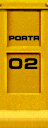
<style>
.page{position:relative;width:48px;height:128px}
.page>*{position:absolute;margin:0}
.t1{font:6.5px "PowermaxBold";color:#000000;scale:0.9 1}
</style>
<div class="page">
<p class="t1" style="left:8px;top:35px;width:32px;height:6px">PORTA</p>
</div>
